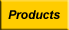
<style>
.page{position:relative;width:69px;height:30px;background:#ffcc00}
.page>*{position:absolute;margin:0}
.t1{font:12px "Arial-BoldItalicMT";color:#010101}
</style>
<div class="page">
<p class="t1" style="left:8px;top:10px;width:52px;height:9px">Products</p>
</div>
